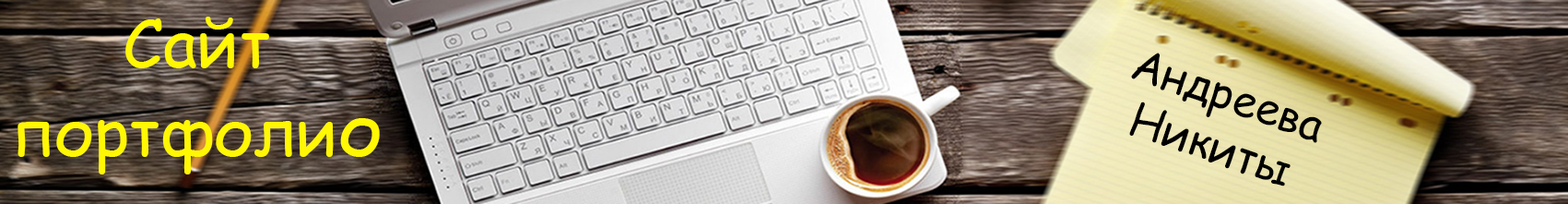
<style>
.page{position:relative;width:1568px;height:204px}
.page>*{position:absolute;margin:0}
.t1{font:66.4px "ComicSansMS";color:#fff704}
.t2{font:73.7px "ComicSansMS";color:#fff704}
.t3{font:44.2px "ComicSansMS";color:#000000}
</style>
<div class="page">
<p class="t1" style="left:18px;top:17px;width:362px;height:157px;text-align:center">Сайт портфоли<span class="t2">о</span></p>
<p class="t3" style="left:1129px;top:53px;width:193px;height:133px;text-align:center;rotate:19deg">Андреева <br>Никиты</p>
</div>
